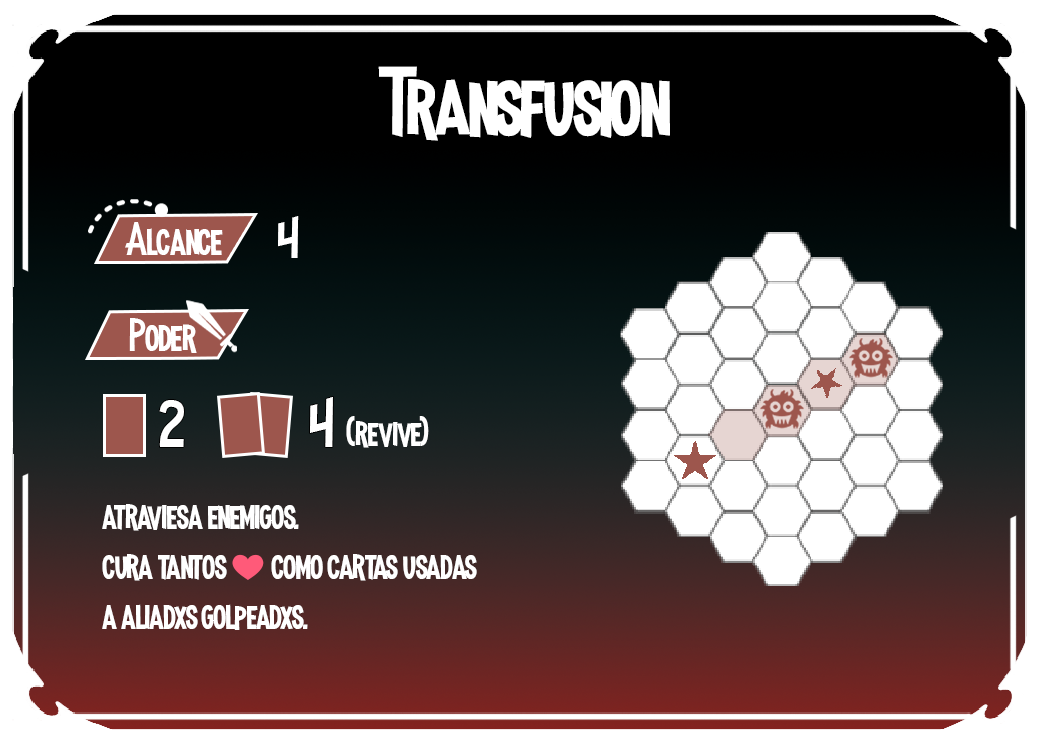
<style>
.page{position:relative;width:1039px;height:744px;background:#ffffff}
.page>*{position:absolute;margin:0}
.t1{font:100px "MadnessHyperactive";color:#ffffff}
.t2{font:45.8px "MadnessHyperactive";color:#ffffff}
.t3{font:55.8px "MadnessHyperactive";color:#ffffff}
.t4{font:66.3px "MadnessHyperactive";color:#ffffff}
.t5{font:41.7px "MadnessHyperactive";color:#ffffff}
.t6{font:33.3px "EmojiOneColor";color:#ffffff}
</style>
<div class="page">
<p class="t1" style="left:378px;top:66px;width:292px;height:75px">Transfusion</p>
<p class="t2" style="left:125px;top:222px;width:98px;height:33px">Alcance</p>
<p class="t3" style="left:278px;top:216px;width:21px;height:42px">4</p>
<p class="t2" style="left:129px;top:318px;width:68px;height:35px">Poder</p>
<p class="t4" style="left:159px;top:400px;width:25px;height:47px">2</p>
<p class="t4" style="left:310px;top:397px;width:23px;height:50px">4</p>
<p class="t5" style="left:346px;top:416px;width:83px;height:32px">(revive)</p>
<p class="t5" style="left:102px;top:504px;width:375px;height:126px">atraviesa enemigos.<br>cura tantos <span class="t6">❤️ </span>como cartas usadas<br>a aliadxs golpeadxs.</p>
</div>
